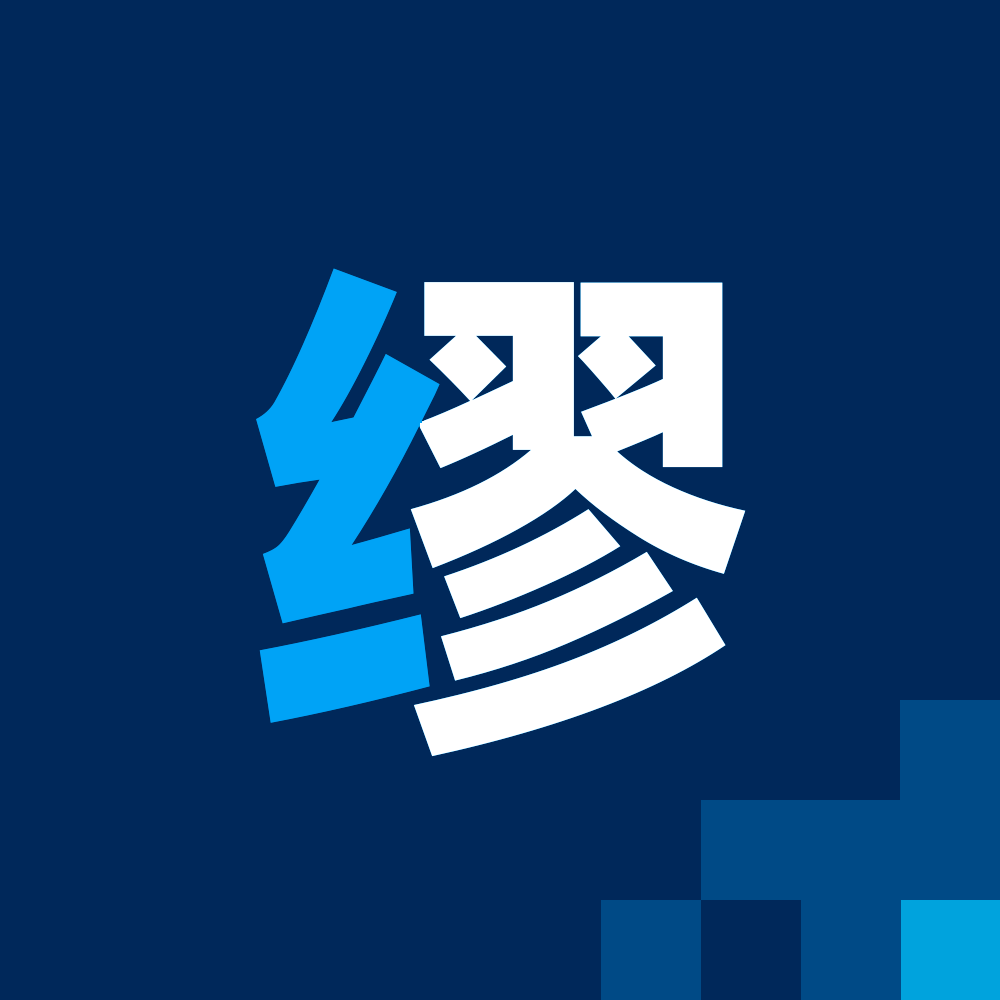
<style>
.page{position:relative;width:1000px;height:1000px;background:#00285a}
.page>*{position:absolute;margin:0}
.t1{font:520.8px "HarmonyOS_Sans_SC_Black";letter-spacing:-0.15em}
</style>
<div class="page">
<p class="t1" style="left:256px;top:268px;width:490px;height:489px">缪</p>
</div>
